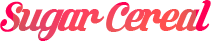
<style>
.page{position:relative;width:212px;height:42px;background:#ffffff}
.page>*{position:absolute;margin:0}
.t1{font:56px "KrinkesRegularPERSONALUSE";letter-spacing:-0.04em;color:#f74759}
</style>
<div class="page">
<p class="t1" style="left:0px;top:0px;width:211px;height:41px">Sugar Cereal</p>
</div>
